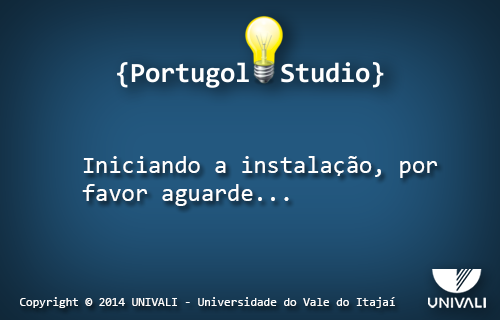
<style>
.page{position:relative;width:500px;height:320px}
.page>*{position:absolute;margin:0}
.t1{font:24px "Consolas";color:#ffffff}
.t2{font:12px "Consolas";color:#ffffff}
</style>
<div class="page">
<p class="t1" style="left:82px;top:156px;width:356px;height:50px">Iniciando a instalação, por favor aguarde...</p>
<p class="t2" style="left:20px;top:297px;width:375px;height:11px">Copyright © 2014 UNIVALI - Universidade do Vale do Itajaí</p>
</div>
